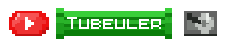
<style>
.page{position:relative;width:226px;height:47px;background:#ffffff}
.page>*{position:absolute;margin:0}
.t1{font:16px "Pixel-Art";color:#ffffff}
</style>
<div class="page">
<p class="t1" style="left:67px;top:17px;width:94px;height:12px">Tubeuler</p>
</div>
